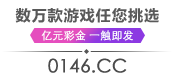
<style>
.page{position:relative;width:175px;height:77px;background:#ffffff}
.page>*{position:absolute;margin:0}
.t1{font:10.9px "STHeitiTC-Light";color:#ffffff;font-weight:bold}
.t2{font:18.4px "STHeitiTC-Light";color:#4b4b4b;font-weight:bold}
</style>
<div class="page">
<p class="t1" style="left:41px;top:30px;width:92px;height:11px">亿元彩金 一触即发</p>
<p class="t2" style="left:48px;top:58px;width:79px;height:15px">0146.CC</p>
</div>
